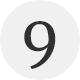
<style>
.page{position:relative;width:80px;height:80px;background:#f0f0f0}
.page>*{position:absolute;margin:0}
.t1{font:60px "Merriweather-Regular";letter-spacing:-0.06em;color:#303030}
</style>
<div class="page">
<p class="t1" style="left:24px;top:21px;width:32px;height:48px">9</p>
</div>
